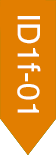
<style>
.page{position:relative;width:56px;height:155px;background:#e27e00}
.page>*{position:absolute;margin:0}
.t1{font:31px "Helvetica";color:#ffffff;scale:1.04 1}
</style>
<div class="page">
<p class="t1" style="left:17px;top:16px;width:24px;height:97px;rotate:90deg">ID1f-01</p>
</div>
